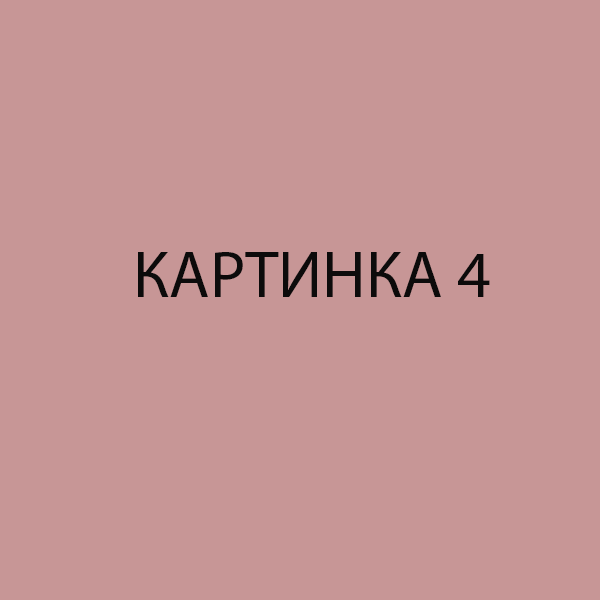
<style>
.page{position:relative;width:600px;height:600px;background:#c79696}
.page>*{position:absolute;margin:0}
.t1{font:66.7px "MyriadPro-Regular";color:#0c0b0b;text-transform:uppercase}
</style>
<div class="page">
<p class="t1" style="left:138px;top:252px;width:352px;height:45px">КАРТИНКА 4</p>
</div>
